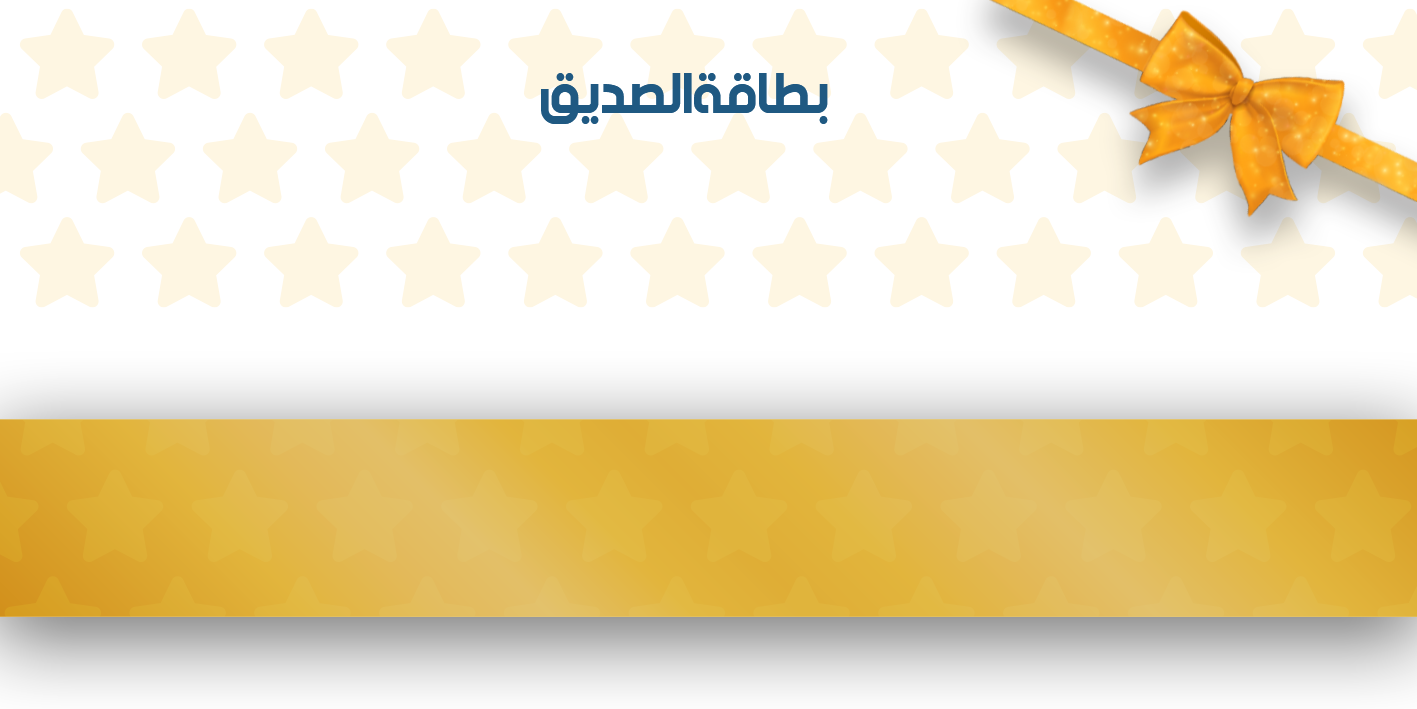
<style>
.page{position:relative;width:1417px;height:709px;background:#ffffff}
.page>*{position:absolute;margin:0}
.t1{font:60.2px "beINBlack";letter-spacing:-0.03em;color:#1f5982}
</style>
<div class="page">
<p class="t1" style="left:541px;top:73px;width:287px;height:51px">بطاقة الصديق</p>
</div>
